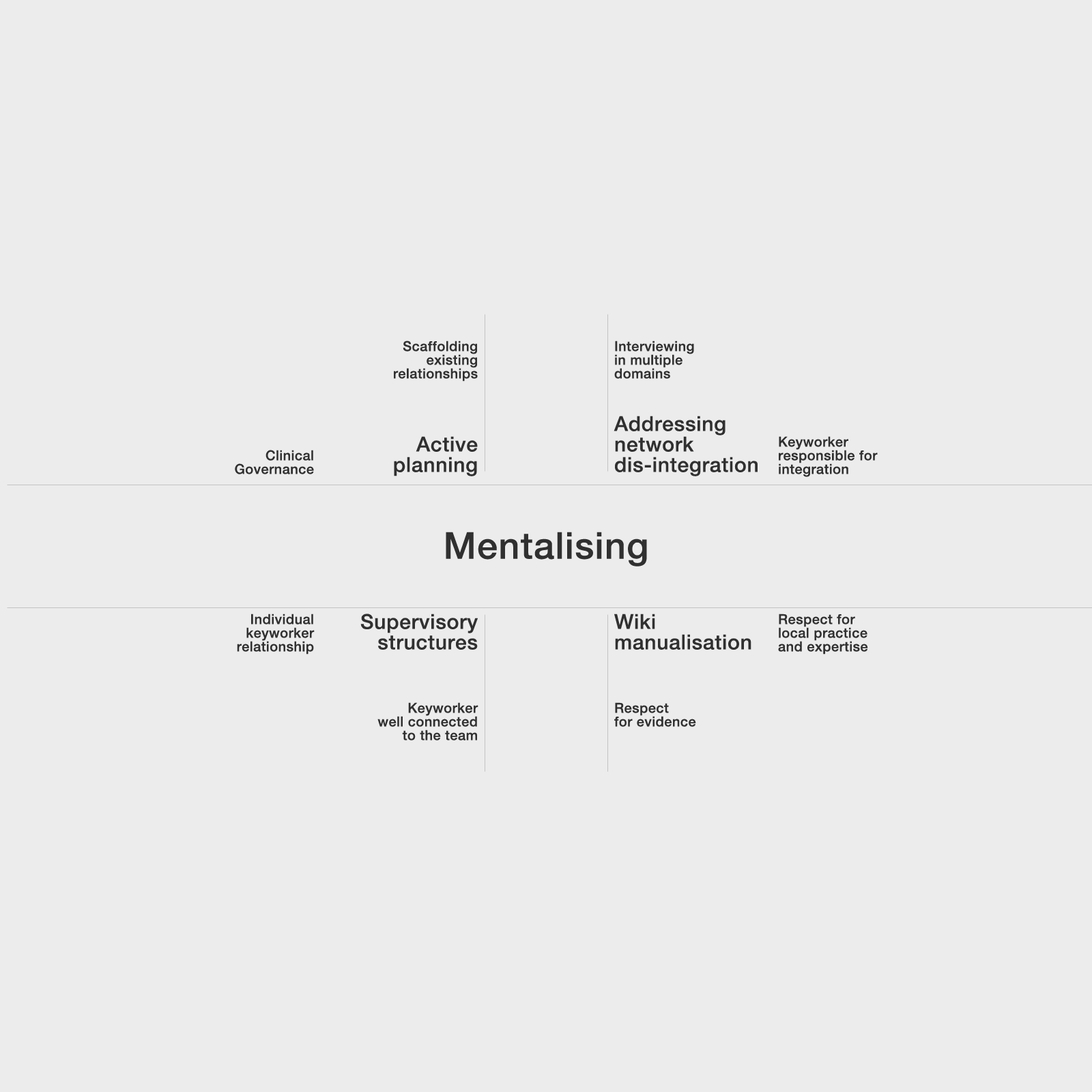
<style>
.page{position:relative;width:1092px;height:1092px;background:#ececec}
.page>*{position:absolute;margin:0}
.t1{font:13.6px/13.6px "HelveticaNeue-Medium";letter-spacing:0.025em;color:#303030}
.t2{font:20.5px/20.5px "HelveticaNeue-Medium";letter-spacing:0.025em;color:#303030}
.t3{font:36.9px "HelveticaNeue-Medium";letter-spacing:0.025em;color:#303030}
</style>
<div class="page">
<p class="t1" style="left:394px;top:341px;width:84px;height:41px;text-align:right">Scaffolding <br>existing <br>relationships</p>
<p class="t1" style="left:614px;top:341px;width:80px;height:38px">Interviewing <br>in multiple <br>domains</p>
<p class="t2" style="left:614px;top:416px;width:144px;height:60px">Addressing <br>network dis-integration</p>
<p class="t2" style="left:394px;top:436px;width:84px;height:40px;text-align:right">Active <br>planning</p>
<p class="t1" style="left:779px;top:436px;width:99px;height:41px">Keyworker responsible for integration</p>
<p class="t1" style="left:235px;top:450px;width:79px;height:24px;text-align:right">Clinical <br>Governance</p>
<p class="t3" style="left:446px;top:532px;width:201px;height:34px">Mentalising</p>
<p class="t1" style="left:237px;top:614px;width:78px;height:41px;text-align:right">Individual <br>keyworker<br>relationship</p>
<p class="t2" style="left:360px;top:614px;width:118px;height:36px;text-align:right">Supervisory<br>structures</p>
<p class="t2" style="left:614px;top:614px;width:137px;height:36px">Wiki<br>manualisation</p>
<p class="t1" style="left:778px;top:614px;width:90px;height:41px">Respect for <br>local practice <br>and expertise</p>
<p class="t1" style="left:377px;top:702px;width:101px;height:39px;text-align:right">Keyworker <br>well connected <br>to the team</p>
<p class="t1" style="left:614px;top:702px;width:82px;height:25px">Respect <br>for evidence</p>
</div>
